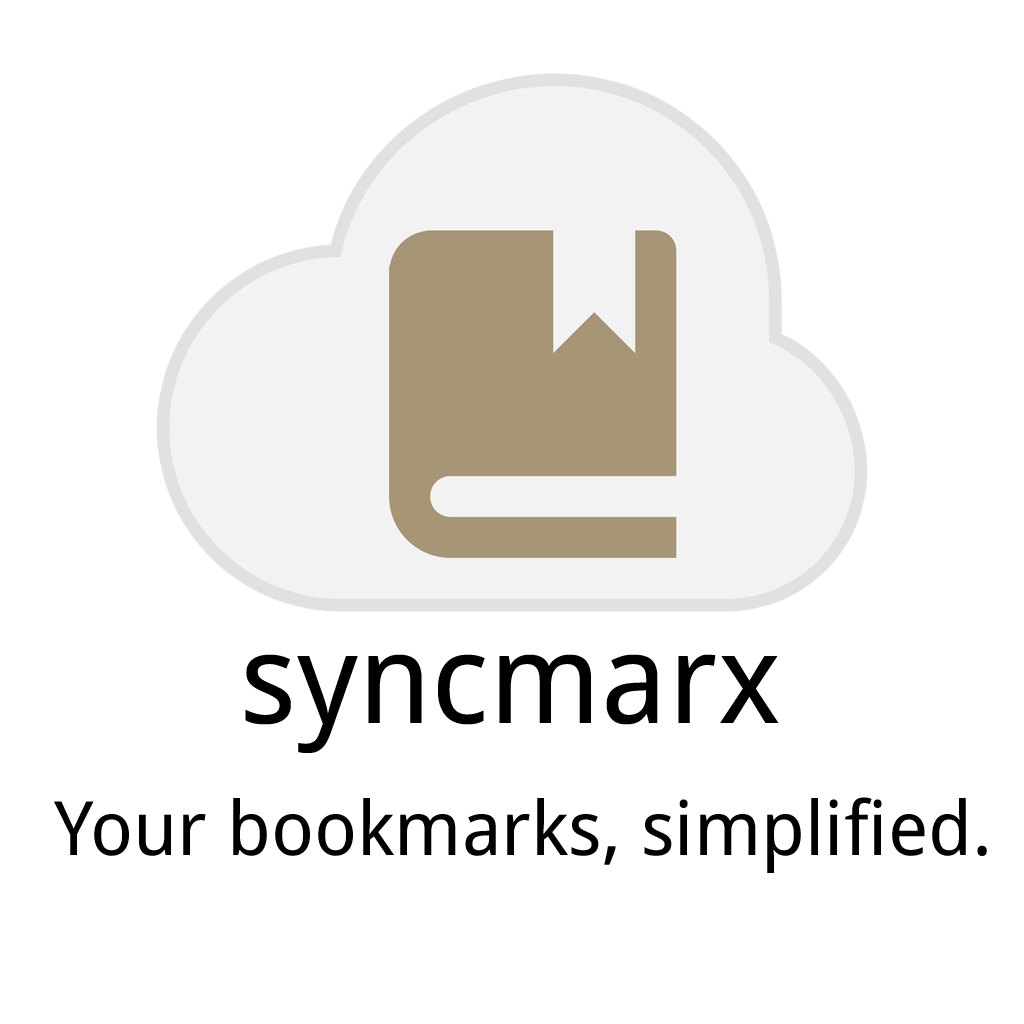
<style>
.page{position:relative;width:1024px;height:1024px;background:#ffffff}
.page>*{position:absolute;margin:0}
.t1{font:125px "DroidSans";color:#000000}
.t2{font:75px "DroidSans";color:#000000}
</style>
<div class="page">
<p class="t1" style="left:245px;top:654px;width:534px;height:99px">syncmarx</p>
<p class="t2" style="left:54px;top:797px;width:933px;height:76px">Your bookmarks, simplified.</p>
</div>
